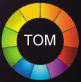
<style>
.page{position:relative;width:81px;height:82px}
.page>*{position:absolute;margin:0}
.t1{font:14.7px "ArialMT";color:#f4ebeb}
</style>
<div class="page">
<p class="t1" style="left:24px;top:34px;width:32px;height:12px">TOM</p>
</div>
